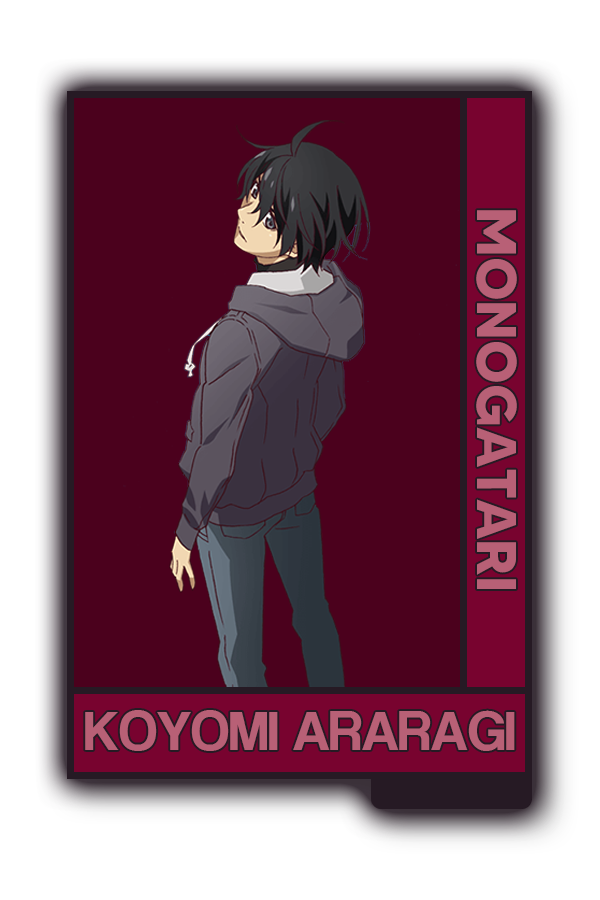
<style>
.page{position:relative;width:600px;height:900px;background:#4b011d}
.page>*{position:absolute;margin:0}
.t1{font:55.8px "MADETOMMY-Bold";color:#b86076}
.t2{font:56.8px "CoolveticaRg-Regular";color:#b86076}
</style>
<div class="page">
<p class="t1" style="left:476px;top:210px;width:41px;height:379px;rotate:90deg">MONOGATARI</p>
<p class="t2" style="left:85px;top:710px;width:430px;height:41px">KOYOMI ARARAGI</p>
</div>
